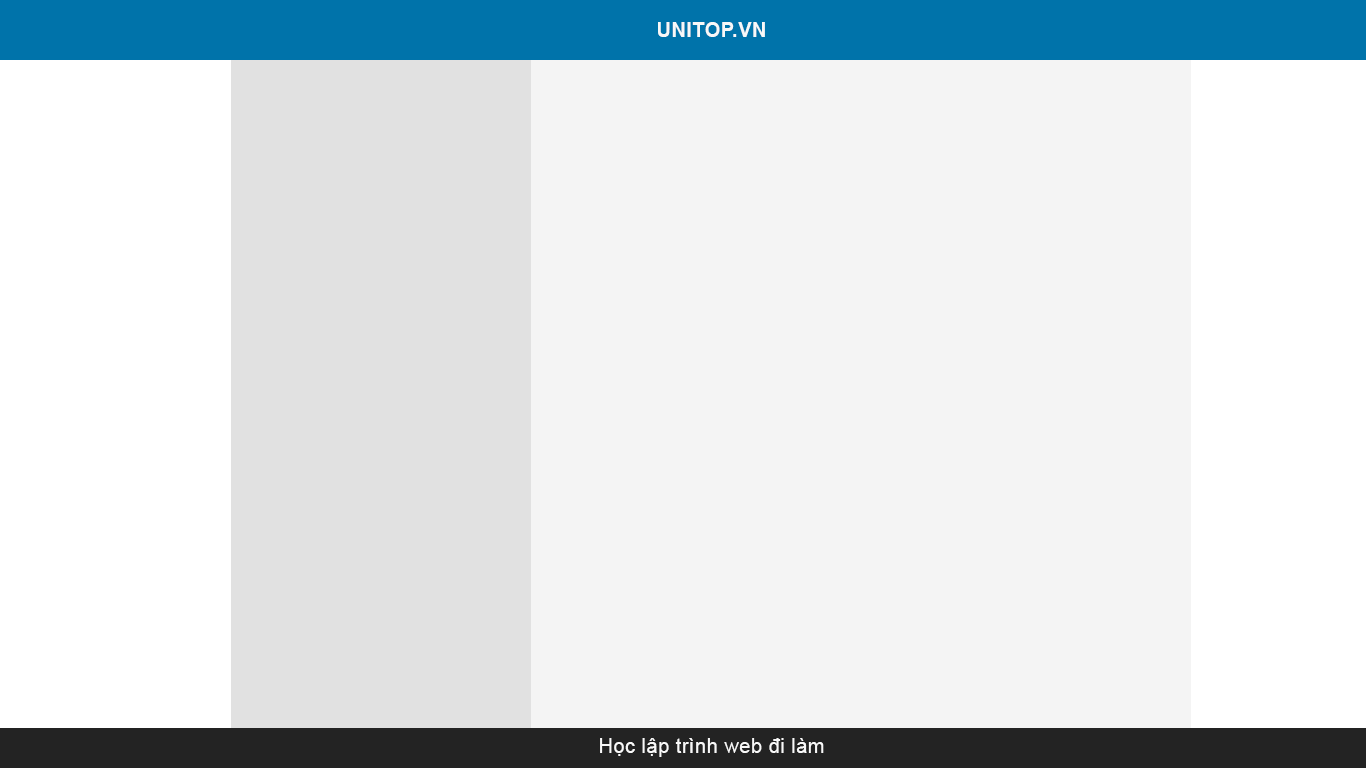
<style>
.page{position:relative;width:1366px;height:768px;background:#f4f4f4}
.page>*{position:absolute;margin:0}
.t1{font:20px "Arial-BoldMT";letter-spacing:0.025em;color:#f8f8f8;text-transform:uppercase}
.t2{font:20px "ArialMT";letter-spacing:0.025em;color:#f8f8f8}
.t3{font:20px "ArialMT";letter-spacing:0.025em;color:#f8f8f8;text-transform:uppercase}
</style>
<div class="page">
<p class="t1" style="left:658px;top:22px;width:107px;height:15px">UNITOP.VN</p>
<p class="t2" style="left:600px;top:738px;width:224px;height:19px"><span class="t3">H</span>ọc lập trình web đi làm</p>
</div>
